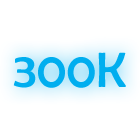
<style>
.page{position:relative;width:140px;height:140px;background:#ffffff}
.page>*{position:absolute;margin:0}
.t1{font:50px "BerlinSansFB-Reg";color:#00aeef}
</style>
<div class="page">
<p class="t1" style="left:13px;top:52px;width:113px;height:36px">300K</p>
</div>
